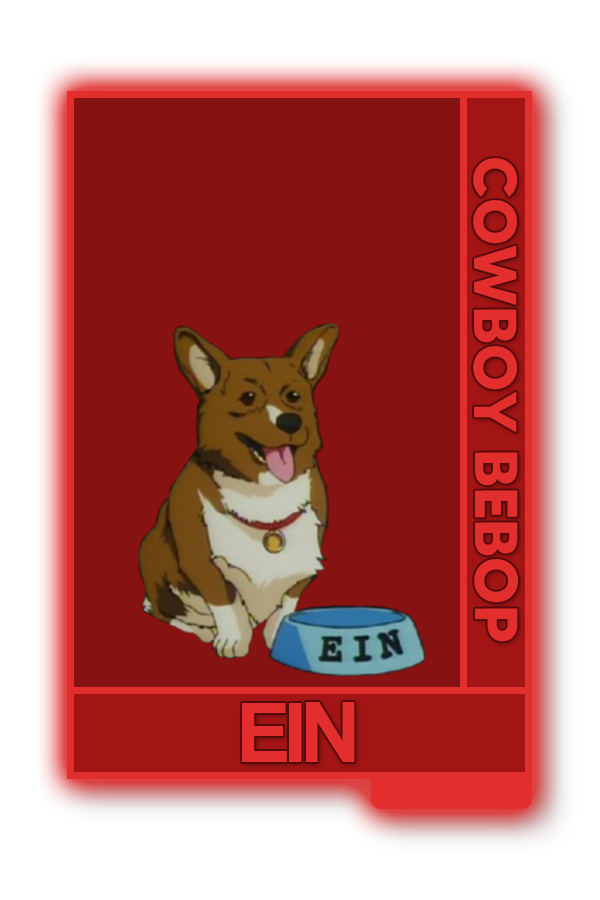
<style>
.page{position:relative;width:600px;height:900px;background:#861211}
.page>*{position:absolute;margin:0}
.t1{font:60.5px "MADETOMMY-Bold";color:#e22f2e}
.t2{font:88.6px "CoolveticaRg-Regular";color:#e22f2e}
</style>
<div class="page">
<p class="t1" style="left:473px;top:158px;width:45px;height:484px;rotate:90deg">COWBOY BEBOP</p>
<p class="t2" style="left:242px;top:702px;width:113px;height:60px">EIN</p>
</div>
